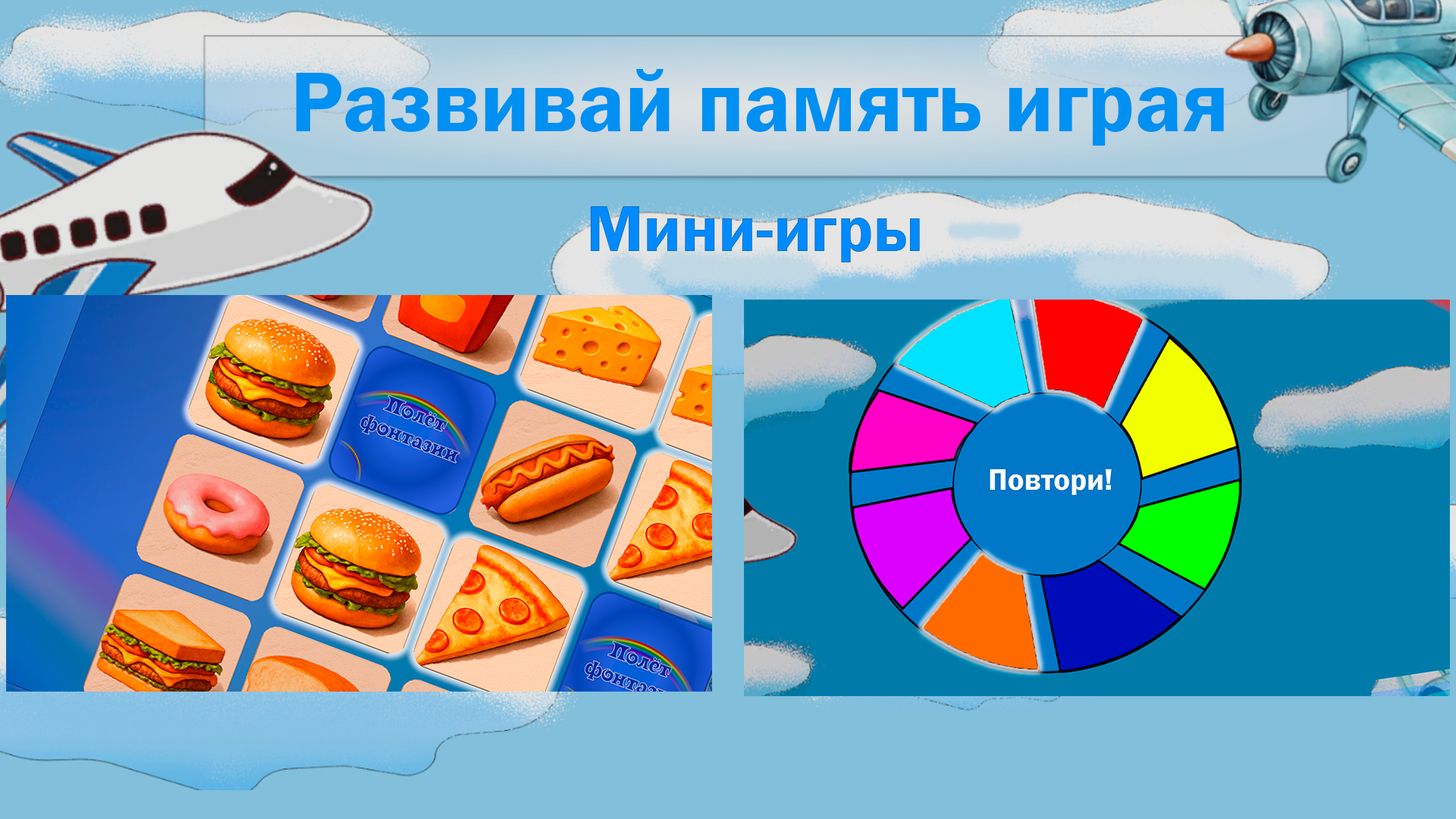
<style>
.page{position:relative;width:1456px;height:819px;background:#81bfdb}
.page>*{position:absolute;margin:0}
.t1{font:87.3px "FranklinGothic-Demi";color:#0090f1}
.t2{font:66.4px "FranklinGothic-Demi";color:#0090f1}
</style>
<div class="page">
<p class="t1" style="left:296px;top:69px;width:928px;height:77px">Развивай память играя</p>
<p class="t2" style="left:590px;top:206px;width:330px;height:56px">Мини-игры</p>
</div>
